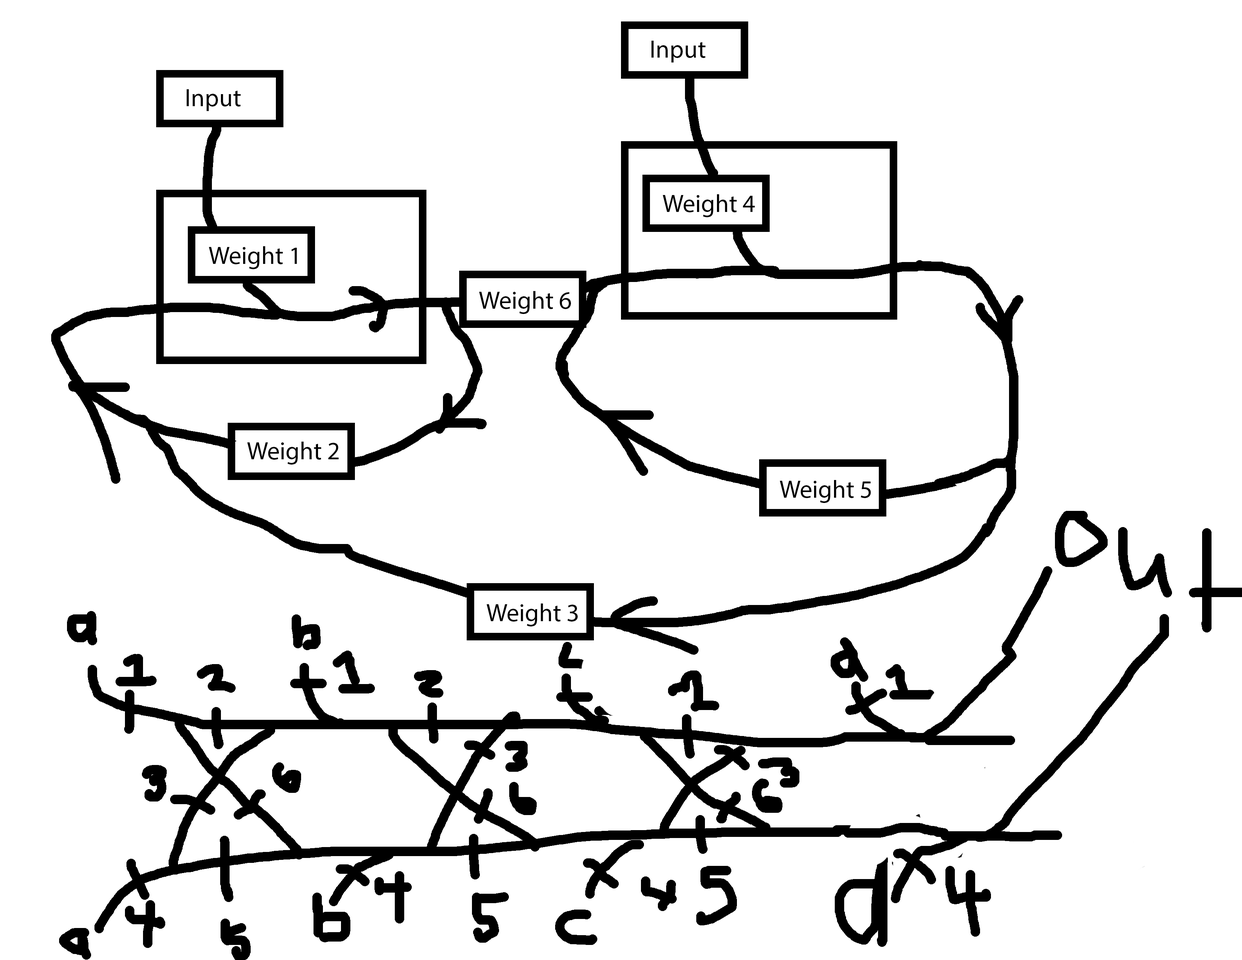
<style>
.page{position:relative;width:1242px;height:960px;background:#ffffff}
.page>*{position:absolute;margin:0}
.t1{font:25.1px "MyriadPro-Regular";color:#000000}
</style>
<div class="page">
<p class="t1" style="left:652px;top:41px;width:54px;height:21px">Input</p>
<p class="t1" style="left:187px;top:89px;width:54px;height:22px">Input</p>
<p class="t1" style="left:663px;top:194px;width:92px;height:23px">Weight 4</p>
<p class="t1" style="left:209px;top:246px;width:88px;height:23px">Weight 1</p>
<p class="t1" style="left:479px;top:291px;width:92px;height:23px">Weight 6</p>
<p class="t1" style="left:247px;top:442px;width:92px;height:23px">Weight 2</p>
<p class="t1" style="left:780px;top:480px;width:91px;height:23px">Weight 5</p>
<p class="t1" style="left:487px;top:603px;width:91px;height:23px">Weight 3</p>
</div>
